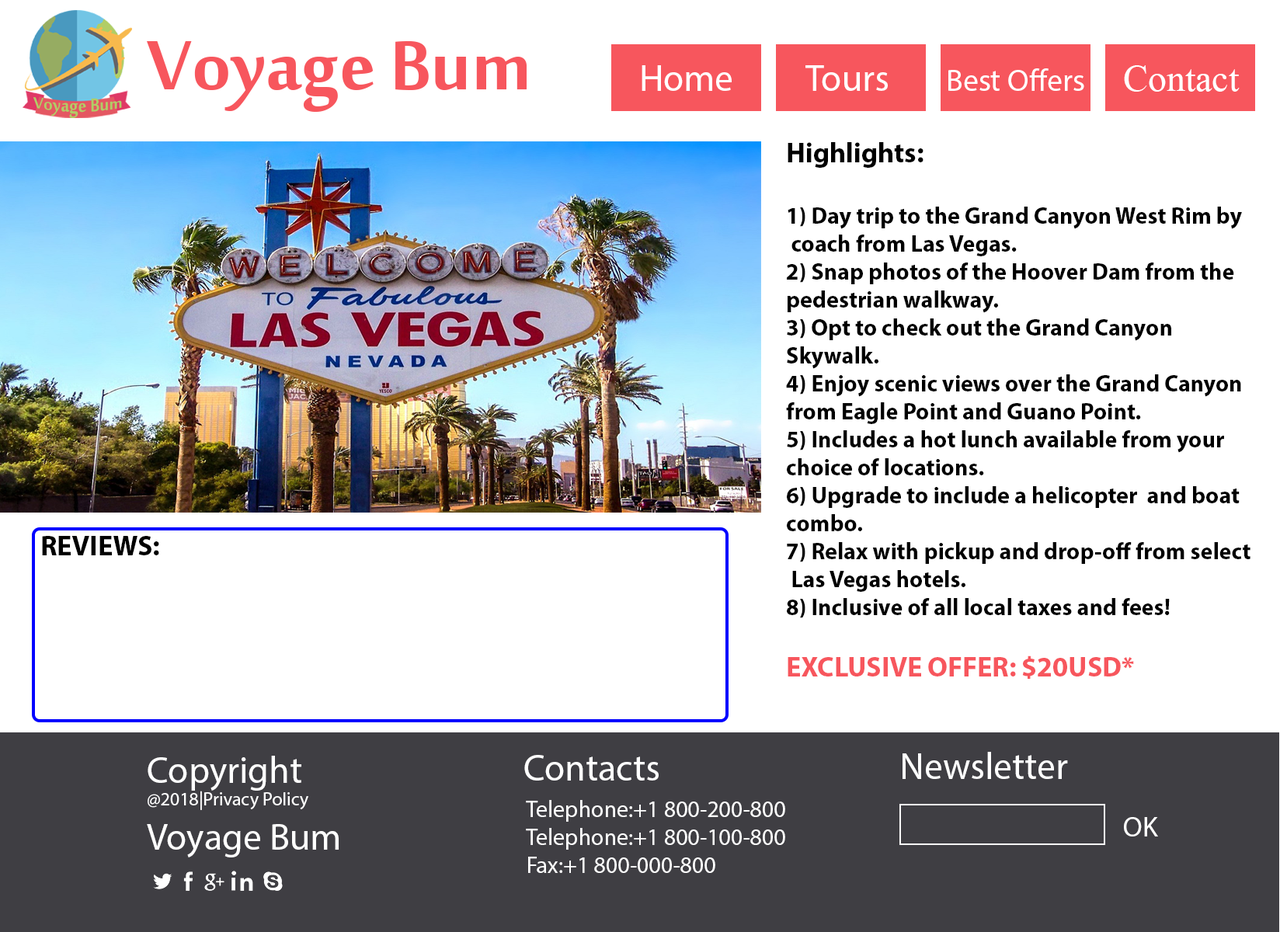
<style>
.page{position:relative;width:1280px;height:932px;background:#ffffff}
.page>*{position:absolute;margin:0}
.t1{font:107.1px "MoolBoran";color:#f7565d}
.t2{font:37.3px "MyriadPro-Regular";color:#ffffff}
.t3{font:37.3px "TimesNewRomanPSMT";color:#ffffff}
.t4{font:31.1px "MyriadPro-Regular";color:#ffffff}
.t5{font:22.6px "MoolBoran";color:#b1cd66;scale:1.14 1}
.t6{font:23.3px "MyriadPro-Bold";color:#000000}
.t7{font:28px "MyriadPro-Bold";color:#000000}
.t8{font:28px "MyriadPro-Bold";color:#f7565d}
.t9{font:18.6px "MyriadPro-Regular";color:#ffffff}
.t10{font:23.3px "MyriadPro-Regular";color:#ffffff}
.t11{font:28px "MyriadPro-Regular";color:#ffffff}
</style>
<div class="page">
<p class="t1" style="left:147px;top:41px;width:379px;height:71px">Voyage Bum</p>
<p class="t2" style="left:641px;top:65px;width:90px;height:26px">Home</p>
<p class="t2" style="left:805px;top:65px;width:83px;height:26px">Tours</p>
<p class="t3" style="left:1124px;top:65px;width:115px;height:27px">Contact</p>
<p class="t4" style="left:948px;top:68px;width:136px;height:23px">Best Offers</p>
<p class="t5" style="left:33px;top:97px;width:89px;height:21px">Voyage Bum</p>
<p class="t6" style="left:786px;top:142px;width:464px;height:537px"><span class="t7">Highlights:<br><br></span>1) Day trip to the Grand Canyon West Rim by<br> coach from Las Vegas.<br>2) Snap photos of the Hoover Dam from the <br>pedestrian walkway.<br>3) Opt to check out the Grand Canyon<br>Skywalk. <br>4) Enjoy scenic views over the Grand Canyon<br>from Eagle Point and Guano Point.<br>5) Includes a hot lunch available from your <br>choice of locations.<br>6) Upgrade to include a helicopter  and boat<br>combo.<br>7) Relax with pickup and drop-off from select<br> Las Vegas hotels.<br>8) Inclusive of all local taxes and fees!<br><br><span class="t8">EXCLUSIVE OFFER: $20USD*</span></p>
<p class="t7" style="left:42px;top:536px;width:117px;height:19px">REVIEWS:</p>
<p class="t9" style="left:147px;top:756px;width:192px;height:101px"><span class="t2">Copyright<br></span>@2018|Privacy Policy<br><span class="t2">Voyage Bum</span></p>
<p class="t2" style="left:524px;top:755px;width:134px;height:25px">Contacts</p>
<p class="t2" style="left:902px;top:752px;width:166px;height:27px">Newsletter</p>
<p class="t10" style="left:526px;top:800px;width:259px;height:73px">Telephone:+1 800-200-800<br>Telephone:+1 800-100-800<br>Fax:+1 800-000-800</p>
<p class="t11" style="left:1124px;top:817px;width:34px;height:19px">OK</p>
</div>
